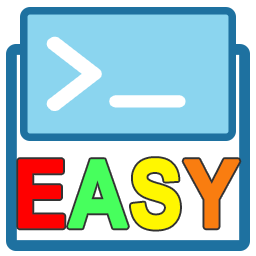
<style>
.page{position:relative;width:256px;height:256px;background:#ffffff}
.page>*{position:absolute;margin:0}
.t1{font:92.4px "NSimSun";color:#ffffff;font-weight:bold;scale:1.3 1}
.t2{font:92.6px "Arial-BoldMT";color:#ff0000;font-weight:bold;scale:0.87 1}
.t3{font:92.6px "Arial-BoldMT";color:#47ff5d;font-weight:bold;scale:0.87 1}
.t4{font:92.6px "Arial-BoldMT";color:#fff700;font-weight:bold;scale:0.87 1}
.t5{font:92.6px "Arial-BoldMT";color:#f97d10;font-weight:bold;scale:0.87 1}
</style>
<div class="page">
<p class="t1" style="left:50px;top:40px;width:48px;height:67px">&gt;</p>
<p class="t2" style="left:18px;top:158px;width:222px;height:72px">E<span class="t3">A</span><span class="t4">S</span><span class="t5">Y</span></p>
</div>
